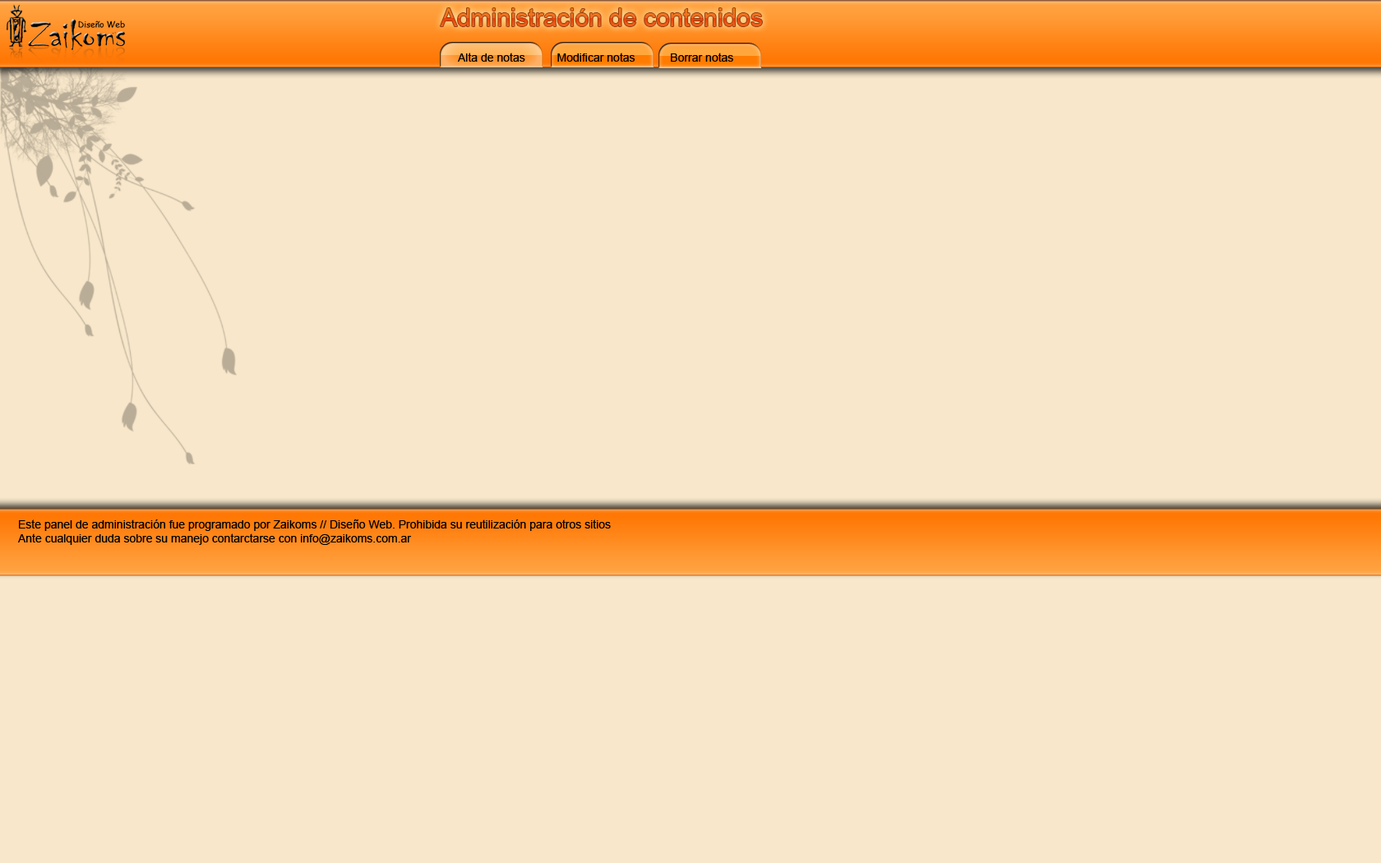
<style>
.page{position:relative;width:1381px;height:863px;background:#f8e7ca}
.page>*{position:absolute;margin:0}
.t1{font:24.7px "ArialMT"}
.t2{font:11.5px "ArialMT";color:#000000}
</style>
<div class="page">
<p class="t1" style="left:440px;top:8px;width:322px;height:18px">Administración de contenidos</p>
<p class="t2" style="left:458px;top:53px;width:275px;height:9px">Alta de notas          Modificar notas           Borrar notas</p>
<p class="t2" style="left:18px;top:520px;width:593px;height:25px">Este panel de administración fue programado por Zaikoms // Diseño Web. Prohibida su reutilización para otros sitios<br>Ante cualquier duda sobre su manejo contarctarse con info@zaikoms.com.ar</p>
</div>
